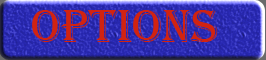
<style>
.page{position:relative;width:266px;height:60px}
.page>*{position:absolute;margin:0}
.t1{font:48px "Algerian";color:#d12311}
</style>
<div class="page">
<p class="t1" style="left:32px;top:10px;width:186px;height:32px">OPTIONS</p>
</div>
